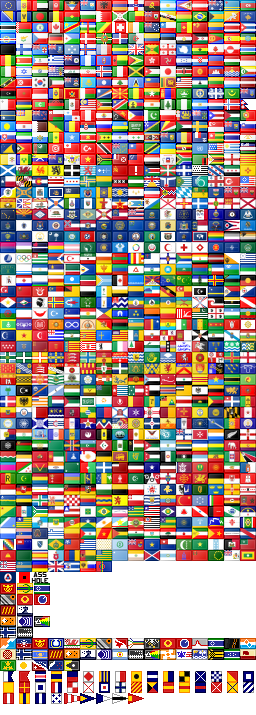
<style>
.page{position:relative;width:256px;height:715px}
.page>*{position:absolute;margin:0}
.t1{font:8px/6.7px "Us-Navy-Markings";color:#000000}
</style>
<div class="page">
<p class="t1" style="left:31px;top:572px;width:18px;height:12px;text-align:center">ass<br>hole</p>
</div>
